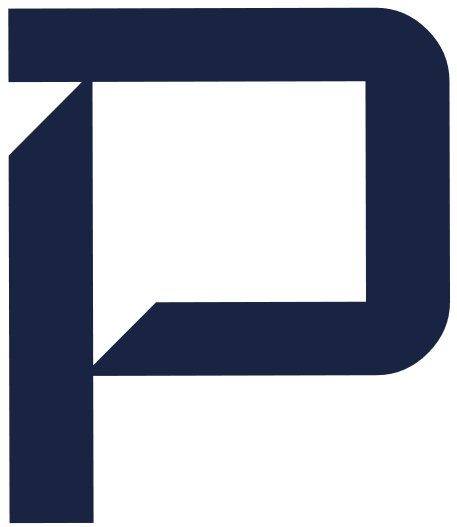
<style>
.page{position:relative;width:457px;height:527px;background:#ffffff}
.page>*{position:absolute;margin:0}
.t1{font:1050px "Iceland-Regular";color:#192342}
</style>
<div class="page">
<p class="t1" style="left:8px;top:7px;width:443px;height:517px">P</p>
</div>
